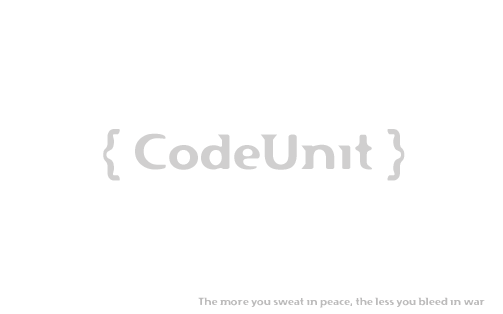
<style>
.page{position:relative;width:503px;height:314px;background:#ffffff}
.page>*{position:absolute;margin:0}
.t1{font:48px "Flexure";color:#bcbbbb}
.t2{font:10px "Flexure";color:#bcbbbb}
</style>
<div class="page">
<p class="t1" style="left:103px;top:129px;width:302px;height:52px;opacity:0.7">{ CodeUnit }</p>
<p class="t2" style="left:198px;top:297px;width:287px;height:11px">The more you sweat in peace, the less you bleed in war</p>
</div>
